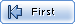
<style>
.page{position:relative;width:75px;height:24px}
.page>*{position:absolute;margin:0}
.t1{font:10px "Tahoma";letter-spacing:0.1em;color:#000000}
</style>
<div class="page">
<p class="t1" style="left:32px;top:8px;width:22px;height:7px">First</p>
</div>
